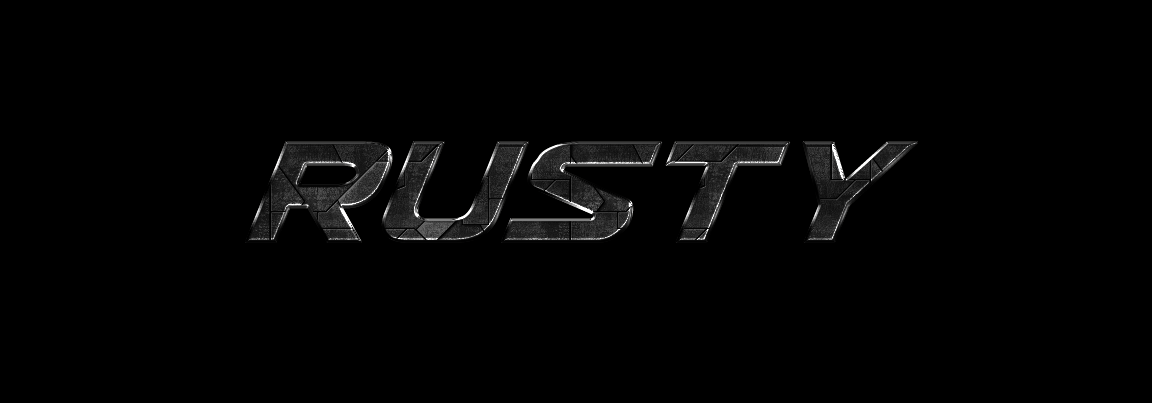
<style>
.page{position:relative;width:1152px;height:403px;background:#000000}
.page>*{position:absolute;margin:0}
.t1{font:172px "UsuziItalic";letter-spacing:-0.025em;font-weight:bold}
</style>
<div class="page">
<p class="t1" style="left:245px;top:141px;width:673px;height:102px">rusty</p>
<p class="t1" style="left:245px;top:141px;width:673px;height:102px">rusty</p>
<p class="t1" style="left:245px;top:141px;width:673px;height:102px">rusty</p>
</div>
